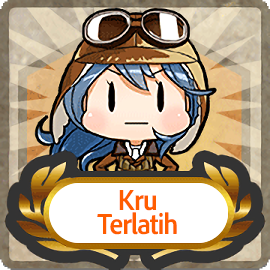
<style>
.page{position:relative;width:270px;height:270px}
.page>*{position:absolute;margin:0}
.t1{font:30px/24px "AdobeClean-Bold";letter-spacing:-0.04em;color:#ff5d00;scale:0.9 1}
</style>
<div class="page">
<p class="t1" style="left:97px;top:190px;width:80px;height:45px;text-align:center">Kru<br>Terlatih</p>
</div>
